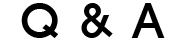
<style>
.page{position:relative;width:187px;height:50px;background:#ffffff}
.page>*{position:absolute;margin:0}
.t1{font:48px "H2wulM";color:#000000}
</style>
<div class="page">
<p class="t1" style="left:21px;top:3px;width:144px;height:35px">Q &amp; A</p>
</div>
